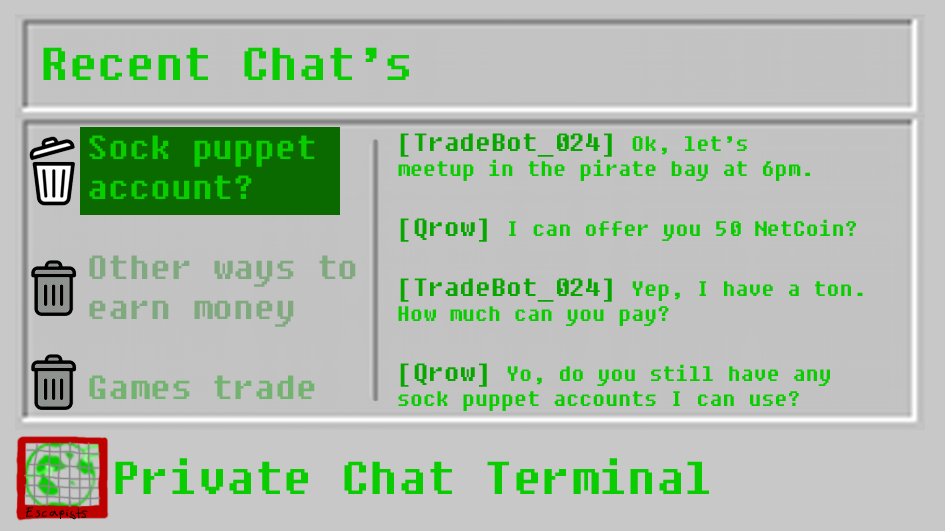
<style>
.page{position:relative;width:945px;height:531px;background:#c3c3c3}
.page>*{position:absolute;margin:0}
.t1{font:45.8px "Fixedsys";color:#0acd00}
.t2{font:33.3px "Fixedsys";color:#81a97f}
.t3{font:33.3px "Fixedsys";color:#0acd00}
.t4{font:33.3px "Fixedsys";color:#73b370}
.t5{font:20.8px "Fixedsys";color:#0acd00}
.t6{font:25px "Fixedsys";color:#08a700}
</style>
<div class="page">
<p class="t1" style="left:43px;top:47px;width:366px;height:33px">Recent Chat’s</p>
<p class="t2" style="left:89px;top:135px;width:267px;height:264px"><span class="t3">Sock puppet <br>account?<br><br></span>Other ways to <br>earn money<br><br><span class="t4">Games trade</span></p>
<p class="t5" style="left:398px;top:133px;width:465px;height:278px"><span class="t6">[TradeBot_024] </span>Ok, let’s <br>meetup in the pirate bay at 6pm.<br><br><span class="t6">[Qrow] </span>I can offer you 50 NetCoin?<br><br><span class="t6">[TradeBot_024] </span>Yep, I have a ton.<br>How much can you pay?<br><br><span class="t6">[Qrow] </span>Yo, do you still have any <br>sock puppet accounts I can use?</p>
<p class="t1" style="left:115px;top:458px;width:594px;height:36px">Private Chat Terminal</p>
</div>
